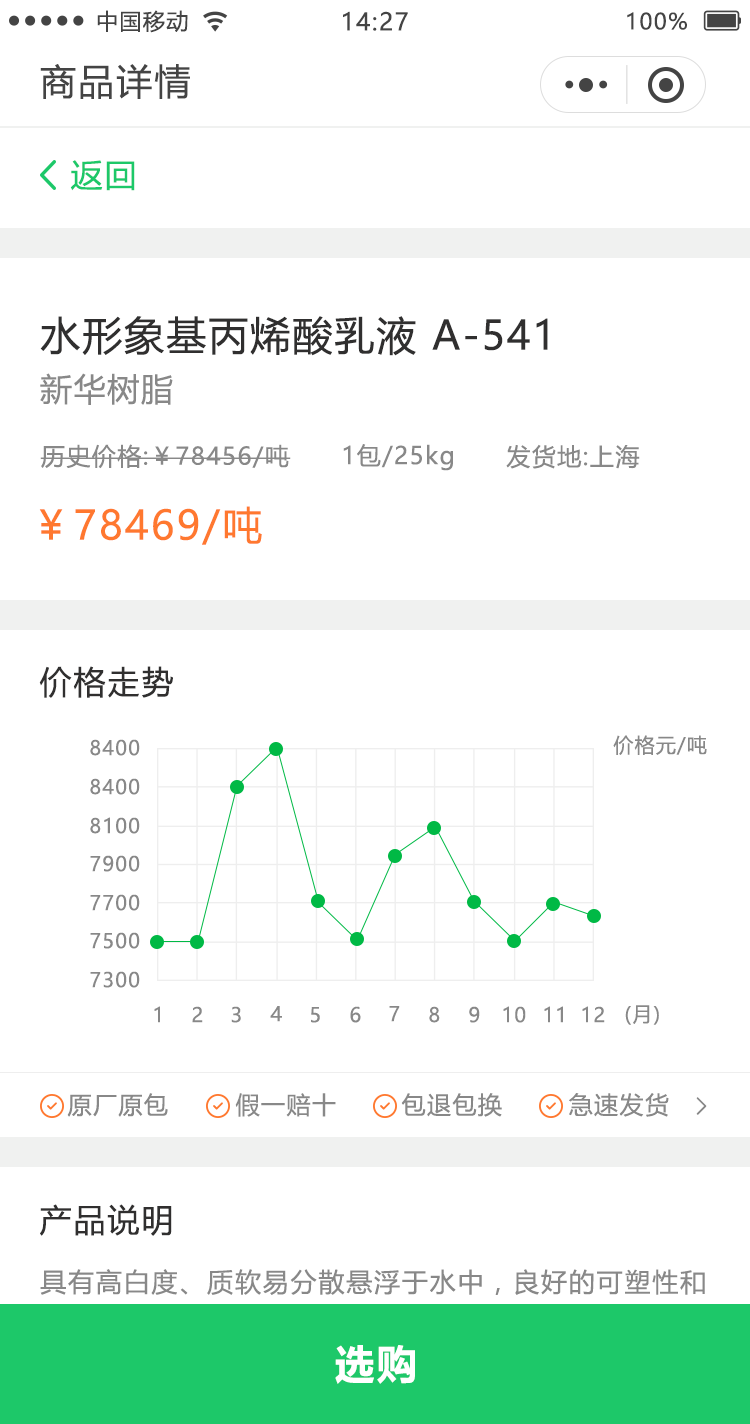
<style>
.page{position:relative;width:750px;height:1424px;background:#ffffff}
.page>*{position:absolute;margin:0}
.t1{font:22px "MicrosoftYaHeiUI";letter-spacing:0.06em;color:#444444}
.t2{font:24px "MicrosoftYaHeiUI";letter-spacing:0.06em;color:#444444}
.t3{font:36px "MicrosoftYaHeiUI";letter-spacing:0.06em;color:#444444}
.t4{font:32px "MicrosoftYaHeiUI";letter-spacing:0.06em;color:#1dc869}
.t5{font:40px "MicrosoftYaHeiUI";letter-spacing:0.05em;color:#302f2f}
.t6{font:32px "MicrosoftYaHeiUI";letter-spacing:0.05em;color:#888888}
.t7{font:24px "MicrosoftYaHeiUI";letter-spacing:0.06em;color:#888888}
.t8{font:40px "MicrosoftYaHeiUI";letter-spacing:0.06em;color:#ff782f}
.t9{font:32px "MicrosoftYaHeiUI";letter-spacing:0.06em;color:#302f2f}
.t10{font:20px "MicrosoftYaHeiUI";letter-spacing:0.06em;color:#888888}
.t11{font:24px "FangSong";letter-spacing:0.06em;color:#888888;font-weight:bold}
.t12{font:26px/40px "MicrosoftYaHeiUI";letter-spacing:0.07em}
.t13{font:40px "MicrosoftYaHeiUI-Bold";letter-spacing:0.06em;color:#ffffff}
</style>
<div class="page">
<p class="t1" style="left:97px;top:10px;width:91px;height:23px">中国移动</p>
<p class="t2" style="left:343px;top:11px;width:65px;height:20px">14:27</p>
<p class="t1" style="left:627px;top:12px;width:60px;height:18px">100%</p>
<p class="t3" style="left:40px;top:64px;width:150px;height:35px">商品详情</p>
<p class="t4" style="left:70px;top:160px;width:65px;height:31px">返回</p>
<p class="t5" style="left:40px;top:316px;width:508px;height:40px">水形象基丙烯酸乳液 A-541</p>
<p class="t6" style="left:40px;top:373px;width:133px;height:32px">新华树脂</p>
<p class="t7" style="left:40px;top:444px;width:251px;height:25px">历史价格:￥78456/吨</p>
<p class="t7" style="left:343px;top:444px;width:110px;height:27px">1包/25kg</p>
<p class="t7" style="left:506px;top:444px;width:134px;height:25px">发货地:上海</p>
<p class="t8" style="left:39px;top:506px;width:223px;height:39px">￥78469/吨</p>
<p class="t9" style="left:39px;top:666px;width:134px;height:32px">价格走势</p>
<p class="t10" style="left:613px;top:735px;width:94px;height:20px">价格元/吨</p>
<p class="t10" style="left:90px;top:739px;width:50px;height:17px">8400</p>
<p class="t10" style="left:90px;top:778px;width:50px;height:17px">8400</p>
<p class="t10" style="left:90px;top:817px;width:50px;height:17px">8100</p>
<p class="t10" style="left:90px;top:855px;width:50px;height:17px">7900</p>
<p class="t10" style="left:90px;top:894px;width:50px;height:17px">7700</p>
<p class="t10" style="left:90px;top:932px;width:50px;height:17px">7500</p>
<p class="t10" style="left:90px;top:971px;width:50px;height:17px">7300</p>
<p class="t10" style="left:154px;top:1006px;width:6px;height:17px">1</p>
<p class="t10" style="left:192px;top:1006px;width:11px;height:17px">2</p>
<p class="t10" style="left:231px;top:1006px;width:10px;height:17px">3</p>
<p class="t10" style="left:270px;top:1006px;width:12px;height:16px">4</p>
<p class="t10" style="left:311px;top:1007px;width:9px;height:16px">5</p>
<p class="t10" style="left:350px;top:1006px;width:11px;height:17px">6</p>
<p class="t10" style="left:389px;top:1006px;width:11px;height:16px">7</p>
<p class="t10" style="left:429px;top:1006px;width:11px;height:17px">8</p>
<p class="t10" style="left:469px;top:1006px;width:11px;height:17px">9</p>
<p class="t10" style="left:503px;top:1006px;width:23px;height:17px">10</p>
<p class="t10" style="left:544px;top:1006px;width:19px;height:17px">11</p>
<p class="t10" style="left:582px;top:1006px;width:23px;height:17px">12</p>
<p class="t10" style="left:625px;top:1005px;width:34px;height:20px">(月)</p>
<p class="t7" style="left:67px;top:1093px;width:101px;height:24px">原厂原包</p>
<p class="t7" style="left:235px;top:1093px;width:101px;height:24px">假一赔十</p>
<p class="t7" style="left:401px;top:1093px;width:101px;height:24px">包退包换</p>
<p class="t7" style="left:569px;top:1093px;width:100px;height:24px">急速发货</p>
<p class="t11" style="left:696px;top:1097px;width:11px;height:18px">&gt;</p>
<p class="t9" style="left:40px;top:1204px;width:132px;height:32px">产品说明</p>
<p class="t12" style="left:40px;top:1269px;width:665px;height:106px">具有高白度、质软易分散悬浮于水中，良好的可塑性和<br>高的粘结性、优良的电绝缘性能以及良好的抗酸溶液、<br>很低的阳离子交换容量。</p>
<p class="t13" style="left:335px;top:1345px;width:80px;height:39px">选购</p>
</div>
